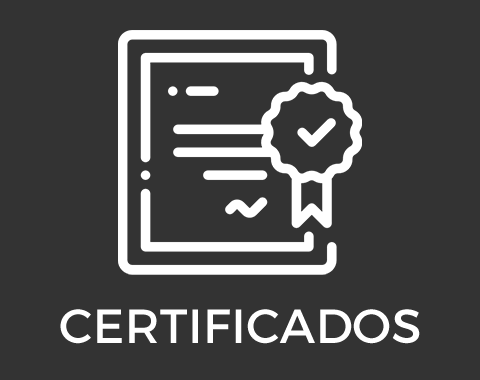
<style>
.page{position:relative;width:480px;height:380px;background:#333333}
.page>*{position:absolute;margin:0}
.t1{font:48px "Montserrat-Regular";letter-spacing:0.01em;color:#ffffff}
</style>
<div class="page">
<p class="t1" style="left:60px;top:309px;width:360px;height:35px">CERTIFICADOS</p>
</div>
